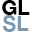
<style>
.page{position:relative;width:32px;height:32px;background:#ffffff}
.page>*{position:absolute;margin:0}
.t1{font:21px/16px "HelveticaNeue-Bold";color:#000000}
.t2{font:21px/16px "HelveticaNeue-Bold";color:#7c99af}
</style>
<div class="page">
<p class="t1" style="left:2px;top:0px;width:28px;height:32px;text-align:center">GL<br><span class="t2">SL</span></p>
</div>
